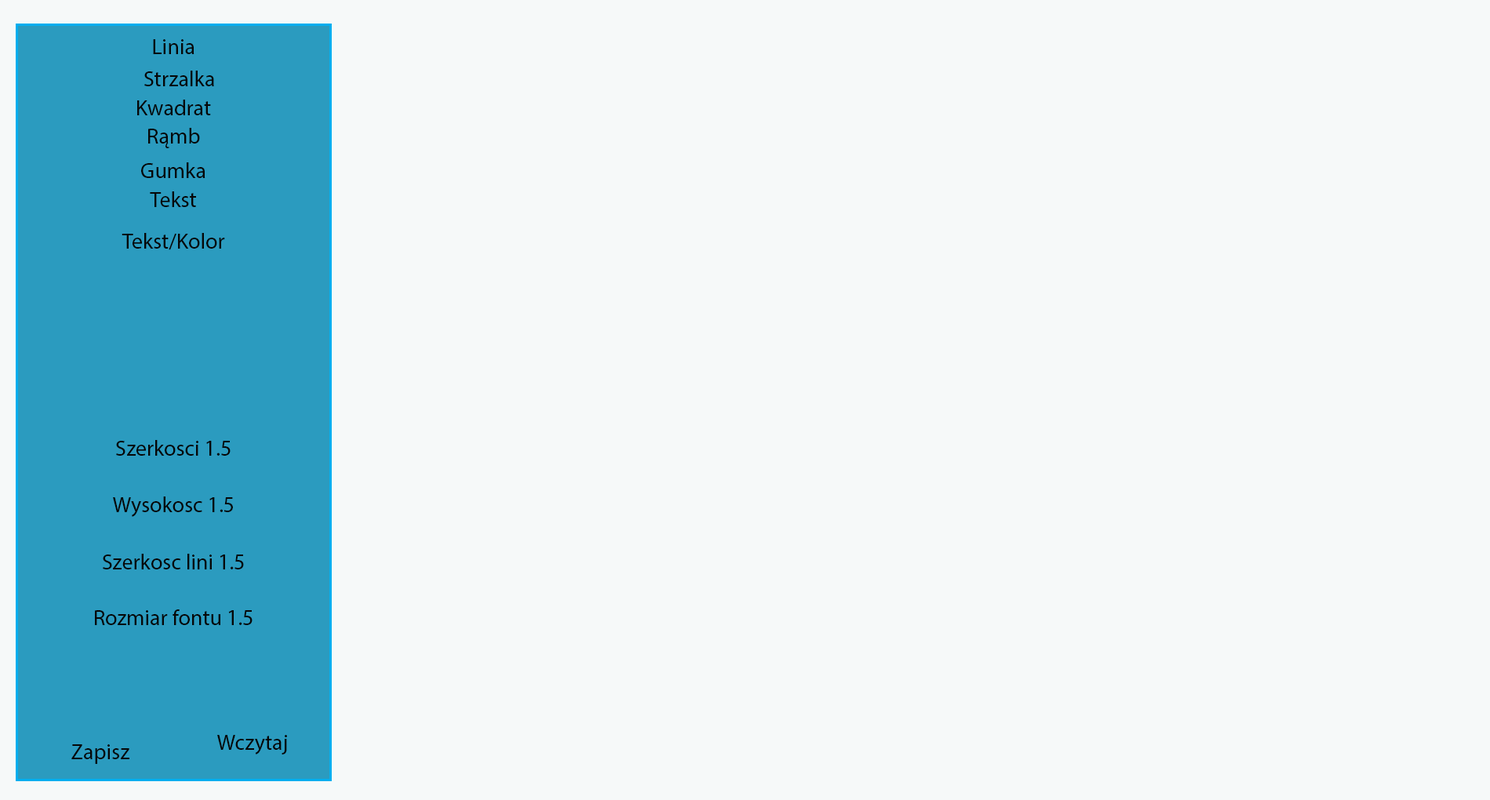
<style>
.page{position:relative;width:1490px;height:800px;background:#f6f9f9}
.page>*{position:absolute;margin:0}
.t1{font:22px "MyriadPro-Regular";color:#060606}
</style>
<div class="page">
<p class="t1" style="left:153px;top:39px;width:42px;height:15px">Linia</p>
<p class="t1" style="left:144px;top:71px;width:70px;height:15px">Strzalka</p>
<p class="t1" style="left:137px;top:100px;width:74px;height:15px">Kwadrat</p>
<p class="t1" style="left:148px;top:128px;width:52px;height:20px">Rąmb</p>
<p class="t1" style="left:141px;top:162px;width:65px;height:16px">Gumka</p>
<p class="t1" style="left:150px;top:191px;width:46px;height:16px">Tekst</p>
<p class="t1" style="left:122px;top:233px;width:103px;height:17px">Tekst/Kolor</p>
<p class="t1" style="left:116px;top:440px;width:115px;height:16px">Szerkosci 1.5</p>
<p class="t1" style="left:113px;top:497px;width:120px;height:20px">Wysokosc 1.5</p>
<p class="t1" style="left:103px;top:554px;width:141px;height:15px">Szerkosc lini 1.5</p>
<p class="t1" style="left:95px;top:609px;width:158px;height:16px">Rozmiar fontu 1.5</p>
<p class="t1" style="left:217px;top:735px;width:70px;height:20px">Wczytaj</p>
<p class="t1" style="left:71px;top:744px;width:58px;height:20px">Zapisz</p>
</div>
